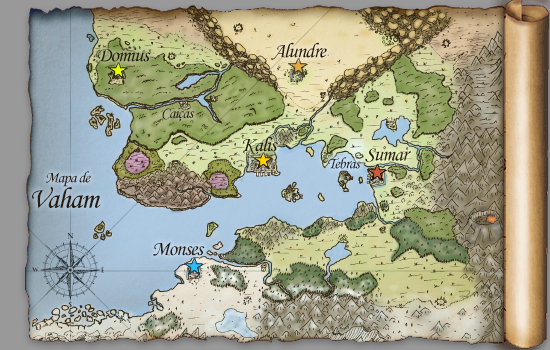
<style>
.page{position:relative;width:550px;height:350px}
.page>*{position:absolute;margin:0}
.t1{font:21px "MonotypeCorsiva";letter-spacing:-0.05em;color:#1b1704}
.t2{font:16px "MonotypeCorsiva";letter-spacing:-0.05em;color:#1b1704}
.t3{font:16px "MonotypeCorsiva";letter-spacing:-0.05em;color:#281c0f}
.t4{font:30px "MonotypeCorsiva";letter-spacing:-0.05em;color:#1b1704}
</style>
<div class="page">
<p class="t1" style="left:98px;top:48px;width:53px;height:14px">Domius</p>
<p class="t1" style="left:271px;top:42px;width:56px;height:18px">Alundre</p>
<p class="t2" style="left:162px;top:107px;width:33px;height:15px">Caiçás</p>
<p class="t1" style="left:243px;top:136px;width:35px;height:19px">Kalis</p>
<p class="t1" style="left:365px;top:148px;width:46px;height:14px">Sumar</p>
<p class="t3" style="left:328px;top:157px;width:33px;height:12px">Tebras</p>
<p class="t2" style="left:46px;top:171px;width:45px;height:16px">Mapa de</p>
<p class="t4" style="left:32px;top:187px;width:69px;height:22px">Vaham</p>
<p class="t1" style="left:153px;top:242px;width:52px;height:14px">Monses</p>
</div>
